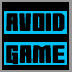
<style>
.page{position:relative;width:72px;height:72px;background:#000000}
.page>*{position:absolute;margin:0}
.t1{font:30px "Morning-Wasabi-Regular";color:#000000}
</style>
<div class="page">
<p class="t1" style="left:6px;top:13px;width:59px;height:18px">Avoid</p>
<p class="t1" style="left:6px;top:45px;width:59px;height:20px">Game</p>
</div>
